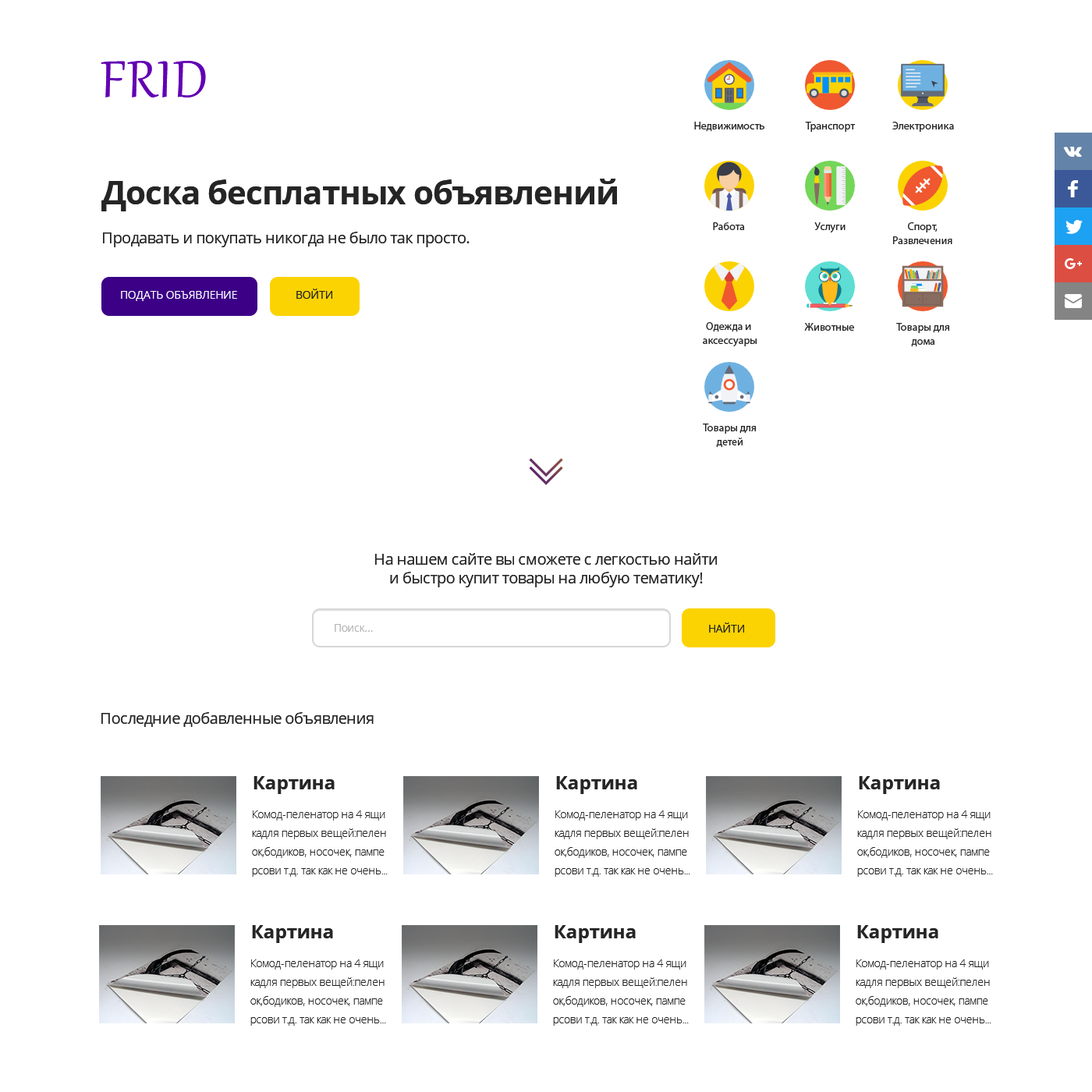
<style>
.page{position:relative;width:1092px;height:1092px;background:#ffffff}
.page>*{position:absolute;margin:0}
.t1{font:63.4px "Gabriola";letter-spacing:0.025em;color:#6200b3}
.t2{font:10.9px "MyriadPro-Regular";color:#252525}
.t3{font:32.8px "OpenSans-Bold";letter-spacing:-0.024em;color:#252525}
.t4{font:15.6px "OpenSans";letter-spacing:-0.024em;color:#252525}
.t5{font:10.9px/14px "MyriadPro-Regular";color:#252525}
.t6{font:10.9px "OpenSans";letter-spacing:-0.024em;color:#ffffff}
.t7{font:10.9px "OpenSans";letter-spacing:-0.024em;color:#252525}
.t8{font:15.6px/18.7px "OpenSans";letter-spacing:-0.024em;color:#252525}
.t9{font:10.9px "OpenSans";letter-spacing:-0.024em;color:#b7b7b7}
.t10{font:18.7px "OpenSans-Bold";color:#262626}
.t11{font:10.9px/18.7px "OpenSans-Light";letter-spacing:-0.024em;color:#252525}
</style>
<div class="page">
<p class="t1" style="left:101px;top:61px;width:105px;height:36px">FRID</p>
<p class="t2" style="left:694px;top:122px;width:70px;height:10px">Недвижимость</p>
<p class="t2" style="left:805px;top:122px;width:51px;height:10px">Транспорт</p>
<p class="t2" style="left:892px;top:122px;width:62px;height:10px">Электроника</p>
<p class="t3" style="left:101px;top:179px;width:516px;height:32px">Доска бесплатных объявлений</p>
<p class="t4" style="left:103px;top:232px;width:367px;height:15px">Продавать и покупать никогда не было так просто.</p>
<p class="t2" style="left:713px;top:222px;width:32px;height:8px">Работа</p>
<p class="t2" style="left:814px;top:222px;width:32px;height:11px">Услуги</p>
<p class="t5" style="left:893px;top:222px;width:59px;height:22px;text-align:center">Спорт,<br>Развлечения</p>
<p class="t6" style="left:121px;top:291px;width:116px;height:10px">ПОДАТЬ ОБЪЯВЛЕНИЕ</p>
<p class="t7" style="left:296px;top:289px;width:36px;height:10px">ВОЙТИ</p>
<p class="t5" style="left:703px;top:322px;width:54px;height:24px;text-align:center">Одежда и <br>аксессуары</p>
<p class="t2" style="left:804px;top:323px;width:50px;height:8px">Животные</p>
<p class="t5" style="left:896px;top:323px;width:53px;height:24px;text-align:center">Товары для<br>дома</p>
<p class="t5" style="left:703px;top:424px;width:53px;height:24px;text-align:center">Товары для<br>детей</p>
<p class="t8" style="left:375px;top:553px;width:342px;height:34px;text-align:center">На нашем сайте вы сможете с легкостью найти<br>и быстро купит товары на любую тематику!</p>
<p class="t9" style="left:335px;top:624px;width:38px;height:8px">Поиск...</p>
<p class="t7" style="left:709px;top:622px;width:35px;height:11px">НАЙТИ</p>
<p class="t4" style="left:101px;top:712px;width:273px;height:15px">Последние добавленные объявления</p>
<p class="t10" style="left:253px;top:776px;width:82px;height:18px">Картина</p>
<p class="t10" style="left:556px;top:776px;width:81px;height:18px">Картина</p>
<p class="t10" style="left:859px;top:776px;width:81px;height:18px">Картина</p>
<p class="t11" style="left:252px;top:810px;width:136px;height:67px">Комод-пеленатор на 4 ящи<br>кадля первых вещей:пелен<br>ок,бодиков, носочек, пампе<br>рсови т.д. так как не очень...</p>
<p class="t11" style="left:555px;top:810px;width:135px;height:67px">Комод-пеленатор на 4 ящи<br>кадля первых вещей:пелен<br>ок,бодиков, носочек, пампе<br>рсови т.д. так как не очень...</p>
<p class="t11" style="left:857px;top:810px;width:136px;height:67px">Комод-пеленатор на 4 ящи<br>кадля первых вещей:пелен<br>ок,бодиков, носочек, пампе<br>рсови т.д. так как не очень...</p>
<p class="t10" style="left:252px;top:925px;width:81px;height:18px">Картина</p>
<p class="t10" style="left:555px;top:925px;width:81px;height:18px">Картина</p>
<p class="t10" style="left:857px;top:925px;width:81px;height:18px">Картина</p>
<p class="t11" style="left:250px;top:959px;width:136px;height:67px">Комод-пеленатор на 4 ящи<br>кадля первых вещей:пелен<br>ок,бодиков, носочек, пампе<br>рсови т.д. так как не очень...</p>
<p class="t11" style="left:553px;top:959px;width:136px;height:67px">Комод-пеленатор на 4 ящи<br>кадля первых вещей:пелен<br>ок,бодиков, носочек, пампе<br>рсови т.д. так как не очень...</p>
<p class="t11" style="left:856px;top:959px;width:135px;height:67px">Комод-пеленатор на 4 ящи<br>кадля первых вещей:пелен<br>ок,бодиков, носочек, пампе<br>рсови т.д. так как не очень...</p>
</div>
